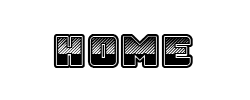
<style>
.page{position:relative;width:250px;height:100px;background:#ffffff}
.page>*{position:absolute;margin:0}
.t1{font:43px "SunsetGP";color:#000000}
</style>
<div class="page">
<p class="t1" style="left:53px;top:34px;width:140px;height:34px">Home</p>
</div>
